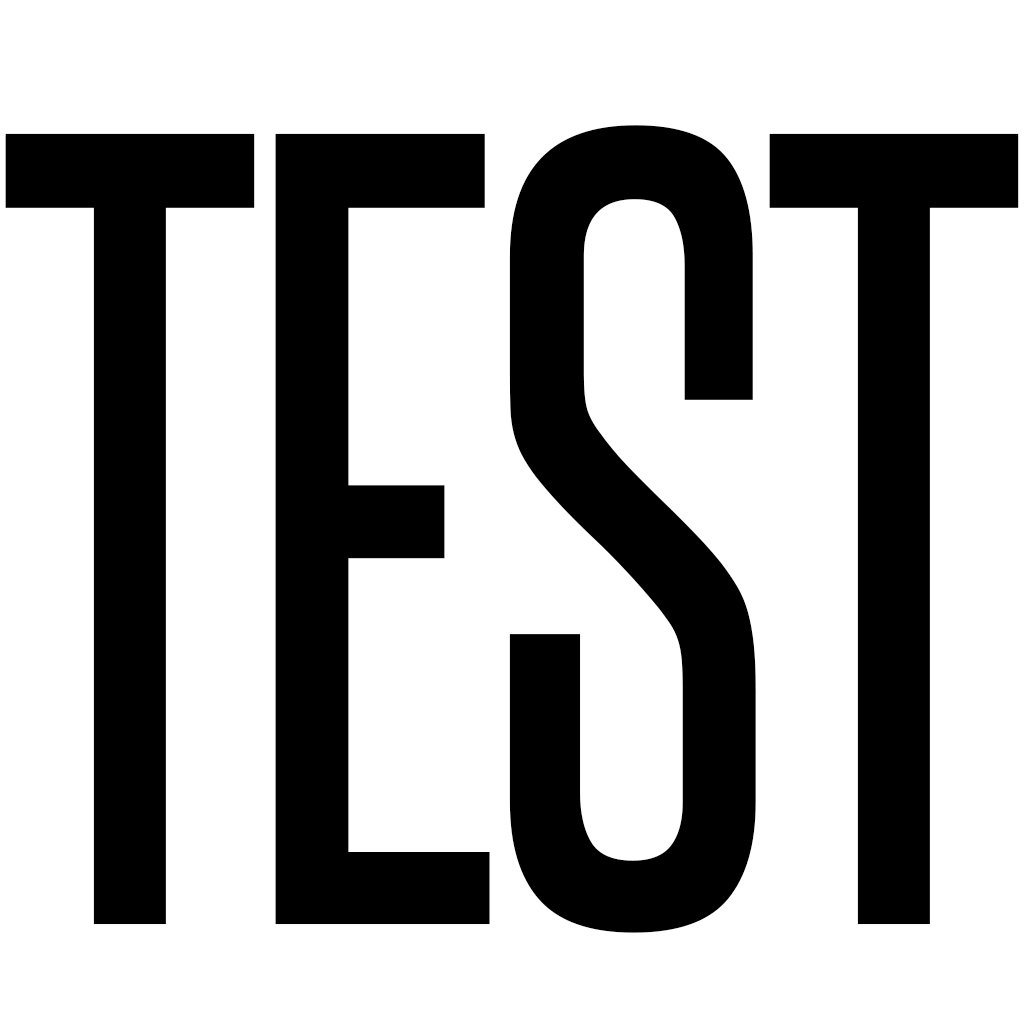
<style>
.page{position:relative;width:1024px;height:1024px;background:#ffffff}
.page>*{position:absolute;margin:0}
.t1{font:960px "SteelfishRg-Regular";letter-spacing:-0.02em;color:#000000}
</style>
<div class="page">
<p class="t1" style="left:5px;top:125px;width:1014px;height:808px">TEST</p>
</div>
